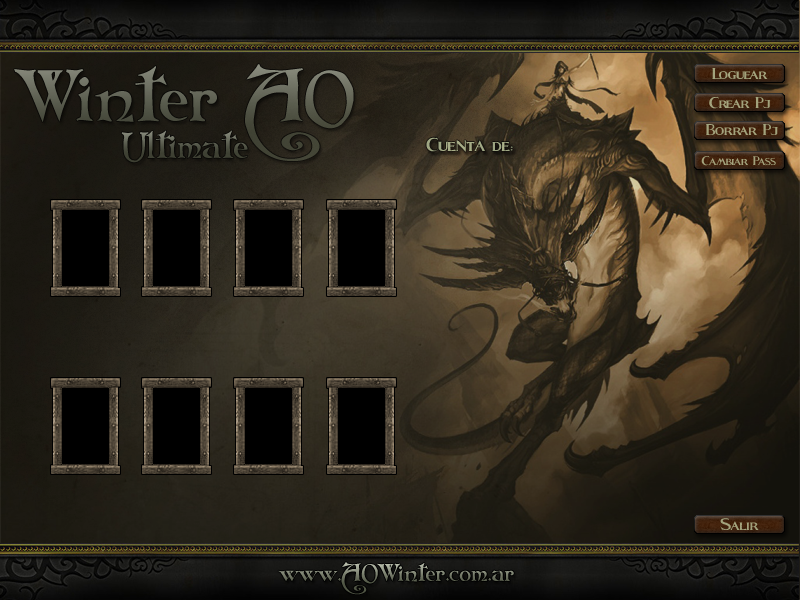
<style>
.page{position:relative;width:800px;height:600px}
.page>*{position:absolute;margin:0}
.t1{font:72px "Folkard"}
.t2{font:30px "Fleet-Street";color:#a2a37d}
.t3{font:30px "Fleet-Street";color:#a2a27c}
.t4{font:36px "Folkard";color:#4c4f41}
.t5{font:36px "Fleet-Street";color:#a1a884}
.t6{font:24px "Fleet-Street";color:#a2a37d}
.t7{font:24px "Folkard"}
</style>
<div class="page">
<p class="t1" style="left:14px;top:64px;width:340px;height:97px">Winter AO</p>
<p class="t2" style="left:712px;top:68px;width:56px;height:11px">Loguear</p>
<p class="t3" style="left:709px;top:96px;width:62px;height:13px">Crear Pj</p>
<p class="t2" style="left:706px;top:124px;width:72px;height:11px">Borrar Pj</p>
<p class="t4" style="left:121px;top:130px;width:127px;height:33px">Ultimate</p>
<p class="t5" style="left:426px;top:137px;width:87px;height:15px">Cuenta de:</p>
<p class="t6" style="left:701px;top:156px;width:75px;height:10px">Cambiar Pass</p>
<p class="t3" style="left:720px;top:518px;width:39px;height:13px">Salir</p>
<p class="t7" style="left:278px;top:562px;width:236px;height:33px">www.AOWinter.com.ar</p>
</div>
